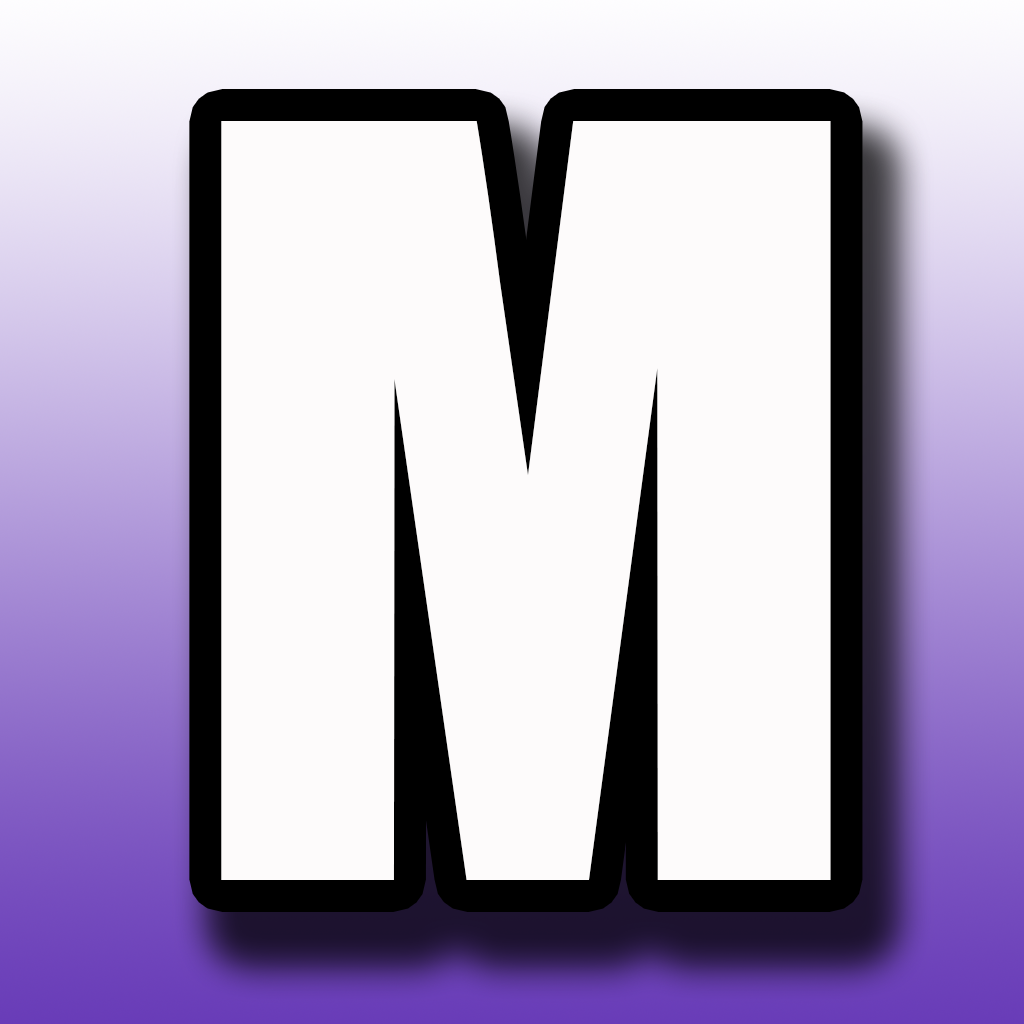
<style>
.page{position:relative;width:1024px;height:1024px;background:#fdfbfb}
.page>*{position:absolute;margin:0}
.t1{font:960px "Impact";color:#fdfbfb}
</style>
<div class="page">
<p class="t1" style="left:221px;top:121px;width:610px;height:759px">M</p>
</div>
